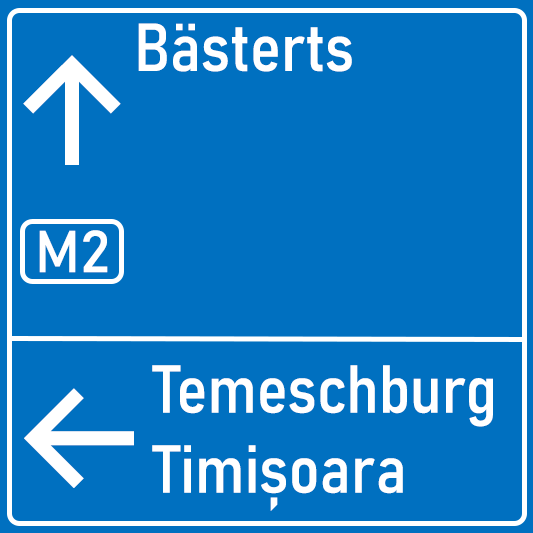
<style>
.page{position:relative;width:533px;height:533px;background:#0070c0}
.page>*{position:absolute;margin:0}
.t1{font:66.7px "Bahnschrift-SemiCondensed";color:#ffffff}
.t2{font:150px "Inter-Medium";color:#ffffff}
.t3{font:58.3px "Bahnschrift";color:#ffffff}
</style>
<div class="page">
<p class="t1" style="left:138px;top:23px;width:214px;height:49px">Bästerts</p>
<p class="t2" style="left:23px;top:55px;width:98px;height:110px">↑</p>
<p class="t3" style="left:39px;top:230px;width:69px;height:43px">M2</p>
<p class="t1" style="left:152px;top:365px;width:341px;height:146px">Temeschburg<br>Timișoara</p>
<p class="t2" style="left:24px;top:388px;width:110px;height:100px">←</p>
</div>
